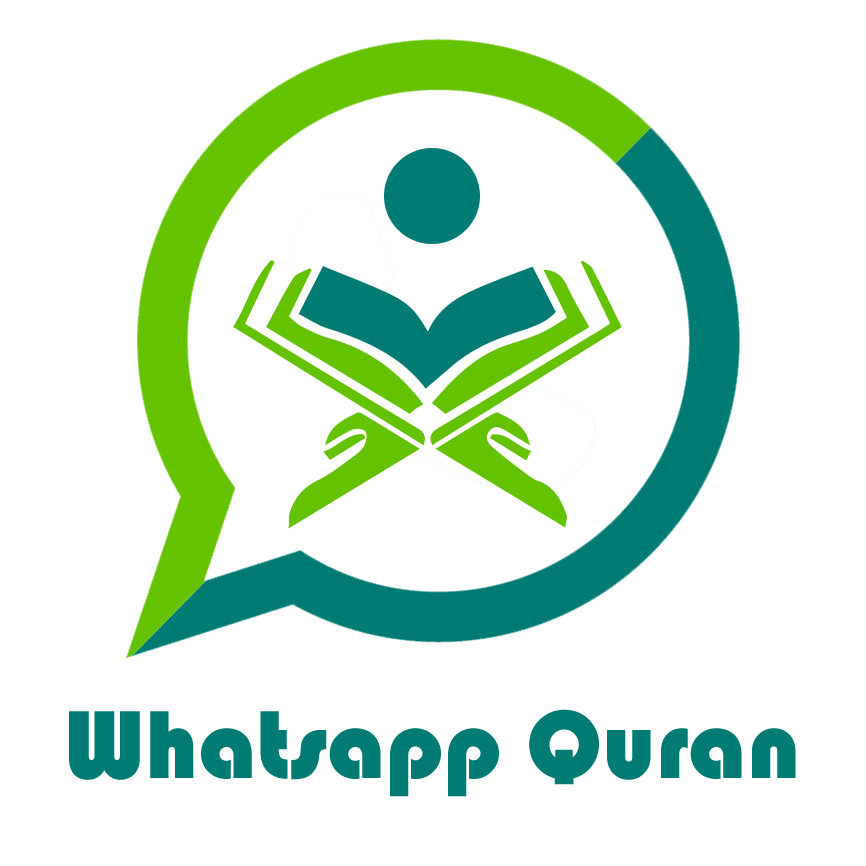
<style>
.page{position:relative;width:866px;height:866px;background:#ffffff}
.page>*{position:absolute;margin:0}
.t1{font:100px "Bauhaus93";color:#007b73}
</style>
<div class="page">
<p class="t1" style="left:69px;top:709px;width:727px;height:88px">Whatsapp Quran</p>
</div>
